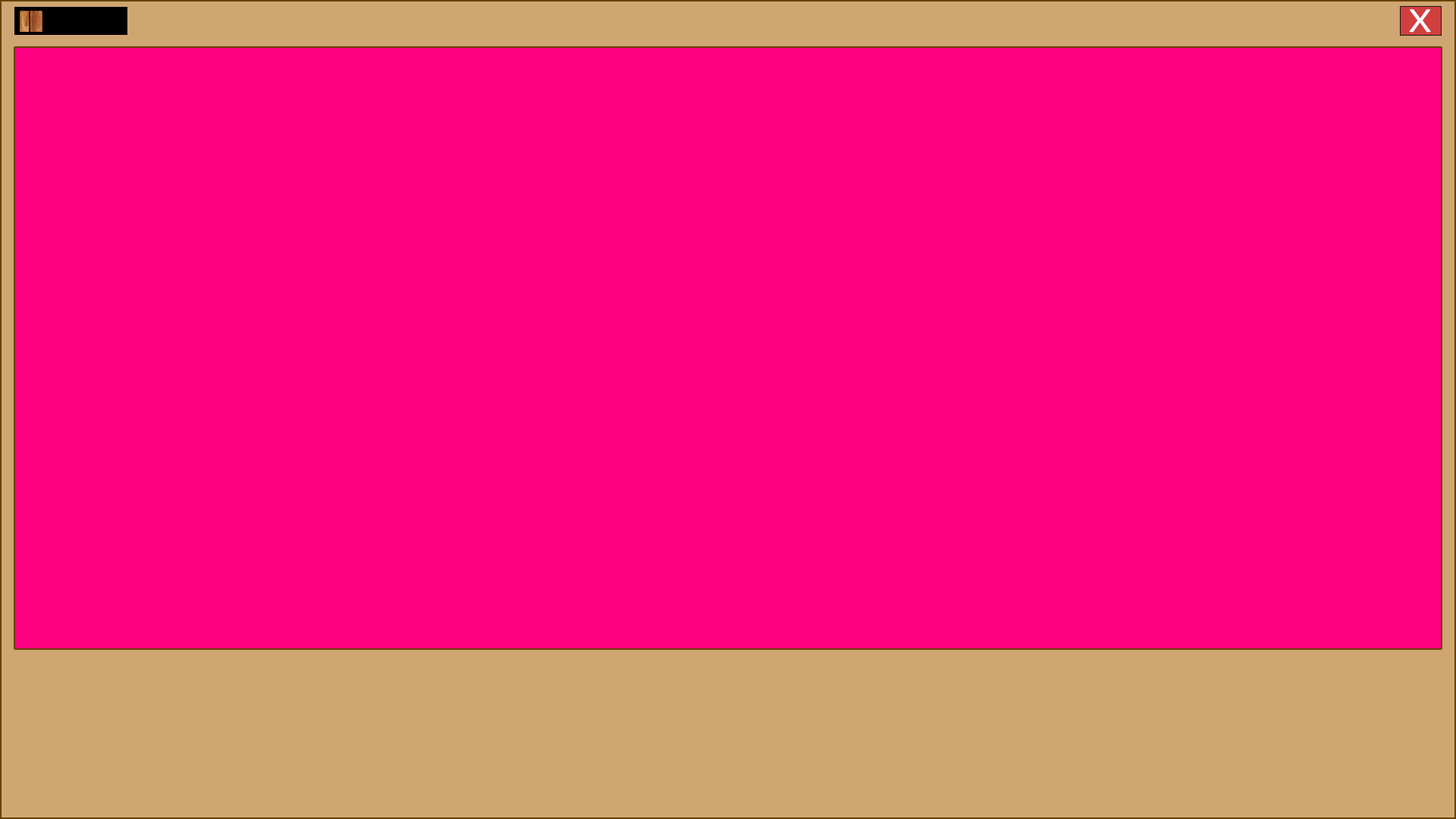
<style>
.page{position:relative;width:1456px;height:819px;background:#ff0080}
.page>*{position:absolute;margin:0}
.t1{font:35.3px "Calibri";color:#ffffff;scale:1.29 1}
</style>
<div class="page">
<p class="t1" style="left:1409px;top:9px;width:22px;height:24px">X</p>
</div>
